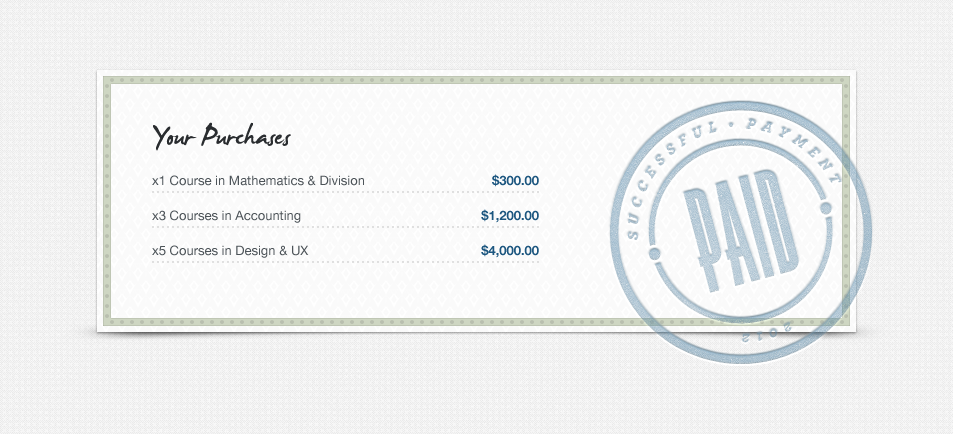
<style>
.page{position:relative;width:953px;height:434px;background:#fafafa}
.page>*{position:absolute;margin:0}
.t1{font:42px "JamesFajardo";color:#292c2f}
.t2{font:13px/35px "HelveticaNeue-Bold";color:#1d5780}
.t3{font:13px/35px "HelveticaNeue";color:#4d5459}
</style>
<div class="page">
<p class="t1" style="left:153px;top:122px;width:138px;height:29px">Your Purchases</p>
<p class="t2" style="left:481px;top:174px;width:58px;height:84px;text-align:right">$300.00<br>$1,200.00<br>$4,000.00</p>
<p class="t3" style="left:152px;top:175px;width:212px;height:83px">x1 Course in Mathematics &amp; Division<br>x3 Courses in Accounting<br>x5 Courses in Design &amp; UX</p>
</div>
